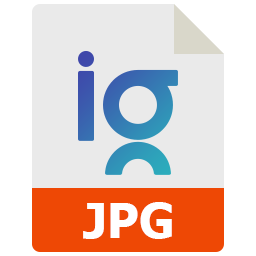
<style>
.page{position:relative;width:256px;height:256px;background:#eaeaea}
.page>*{position:absolute;margin:0}
.t1{font:48px "Tahoma-Bold";color:#ffffff}
</style>
<div class="page">
<p class="t1" style="left:83px;top:202px;width:89px;height:37px">JPG</p>
</div>
